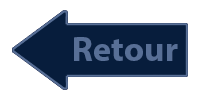
<style>
.page{position:relative;width:200px;height:100px;background:#ffffff}
.page>*{position:absolute;margin:0}
.t1{font:35px "MyriadPro-Bold";color:#586f96}
</style>
<div class="page">
<p class="t1" style="left:74px;top:37px;width:104px;height:24px">Retour</p>
</div>
